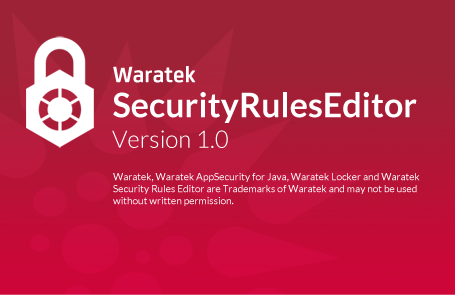
<style>
.page{position:relative;width:455px;height:295px}
.page>*{position:absolute;margin:0}
.t1{font:24px "FSJoey-Bold";color:#ffffff}
.t2{font:34px "Lato-Bold";color:#ffffff}
.t3{font:24px "Lato-Light";color:#ffffff}
.t4{font:10px "Lato-Regular";color:#ffffff}
.t5{font:10px "Lato-Bold";color:#ffffff}
</style>
<div class="page">
<p class="t1" style="left:113px;top:66px;width:83px;height:17px">Waratek</p>
<p class="t2" style="left:113px;top:92px;width:304px;height:31px">SecurityRulesEditor</p>
<p class="t3" style="left:112px;top:130px;width:116px;height:18px">Version 1.0</p>
<p class="t4" style="left:113px;top:173px;width:307px;height:33px">Waratek, Waratek AppSecurity for Java, Waratek Locker and Waratek<br>Security Rules Editor are Trademarks of Waratek and may not be used <br>without written permission<span class="t5">.</span></p>
</div>
